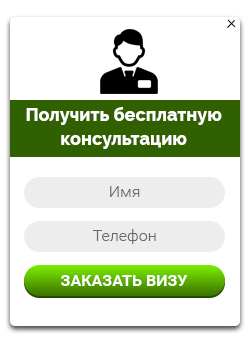
<style>
.page{position:relative;width:250px;height:346px;background:#ffffff}
.page>*{position:absolute;margin:0}
.t1{font:18px/24px "Raleway-ExtraBold";color:#fefefe}
.t2{font:16px "Roboto-Light";color:#696969}
.t3{font:16px "Roboto-Bold";color:#ffffff}
</style>
<div class="page">
<p class="t1" style="left:26px;top:106px;width:196px;height:43px;text-align:center">Получить бесплатную консультацию</p>
<p class="t2" style="left:110px;top:186px;width:30px;height:11px">Имя</p>
<p class="t2" style="left:93px;top:229px;width:63px;height:15px">Телефон</p>
<p class="t3" style="left:61px;top:275px;width:127px;height:11px">ЗАКАЗАТЬ ВИЗУ</p>
</div>
